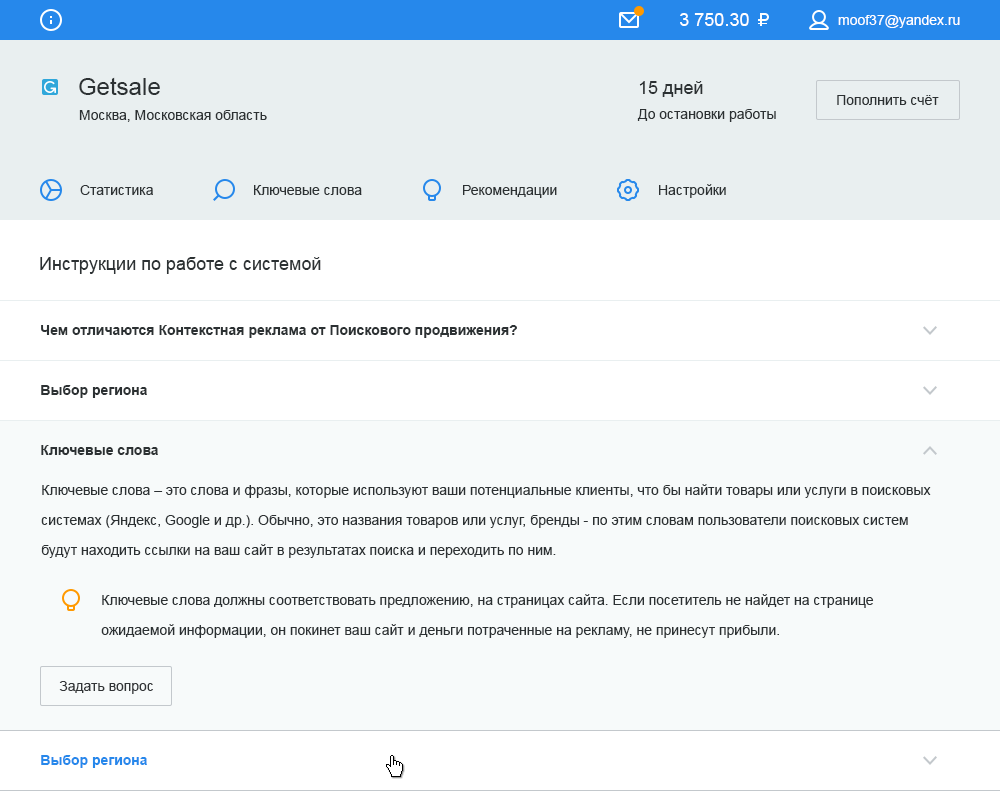
<style>
.page{position:relative;width:1000px;height:800px;background:#f7fafa}
.page>*{position:absolute;margin:0}
.t1{font:18px "ArialMT";color:#ffffff}
.t2{font:14px "ArialMT";color:#ffffff}
.t3{font:24px "ArialMT";color:#2c3133}
.t4{font:18px "ArialMT";color:#2c3133}
.t5{font:14px "ArialMT";color:#2c3133}
.t6{font:14px "Arial-BoldMT";color:#2c3133}
.t7{font:14px/30px "ArialMT";color:#2c3133}
.t8{font:14px "ArialMT";color:#313436}
.t9{font:14px "Arial-BoldMT";color:#2688eb}
</style>
<div class="page">
<p class="t1" style="left:680px;top:13px;width:69px;height:13px">3 750.30</p>
<p class="t2" style="left:838px;top:15px;width:122px;height:13px">moof37@yandex.ru</p>
<p class="t3" style="left:79px;top:77px;width:81px;height:18px">Getsale</p>
<p class="t4" style="left:639px;top:81px;width:64px;height:16px">15 дней</p>
<p class="t5" style="left:837px;top:95px;width:102px;height:10px">Пополнить счёт</p>
<p class="t5" style="left:79px;top:110px;width:188px;height:12px">Москва, Московская область</p>
<p class="t5" style="left:637px;top:109px;width:139px;height:13px">До остановки работы</p>
<p class="t5" style="left:80px;top:185px;width:73px;height:10px">Статистика</p>
<p class="t5" style="left:254px;top:185px;width:108px;height:10px">Ключевые слова</p>
<p class="t5" style="left:463px;top:185px;width:94px;height:13px">Рекомендации</p>
<p class="t5" style="left:659px;top:184px;width:67px;height:14px">Настройки</p>
<p class="t4" style="left:40px;top:257px;width:281px;height:17px">Инструкции по работе с системой</p>
<p class="t6" style="left:41px;top:325px;width:476px;height:13px">Чем отличаются Контекстная реклама от Поискового продвижения?</p>
<p class="t6" style="left:41px;top:385px;width:106px;height:13px">Выбор региона</p>
<p class="t6" style="left:41px;top:445px;width:117px;height:10px">Ключевые слова</p>
<p class="t7" style="left:41px;top:484px;width:890px;height:74px">Ключевые слова – это слова и фразы, которые используют ваши потенциальные клиенты, что бы найти товары или услуги в поисковых <br>системах (Яндекс, Google и др.). Обычно, это названия товаров или услуг, бренды - по этим словам пользователи поисковых систем <br>будут находить ссылки на ваш сайт в результатах поиска и переходить по ним.</p>
<p class="t7" style="left:101px;top:594px;width:773px;height:44px">Ключевые слова должны соответствовать предложению, на страницах сайта. Если посетитель не найдет на странице <br>ожидаемой информации, он покинет ваш сайт и деньги потраченные на рекламу, не принесут прибыли.</p>
<p class="t8" style="left:59px;top:681px;width:94px;height:13px">Задать вопрос</p>
<p class="t9" style="left:41px;top:755px;width:106px;height:13px">Выбор региона</p>
</div>
